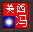
<style>
.page{position:relative;width:33px;height:32px;background:#f20000}
.page>*{position:absolute;margin:0}
.t1{font:10.4px "SimSun";color:#ffffff}
.t2{font:11.7px "SimSun";color:#ffffff}
</style>
<div class="page">
<p class="t1" style="left:6px;top:4px;width:19px;height:9px">美西</p>
<p class="t2" style="left:16px;top:15px;width:11px;height:12px">冯</p>
</div>
